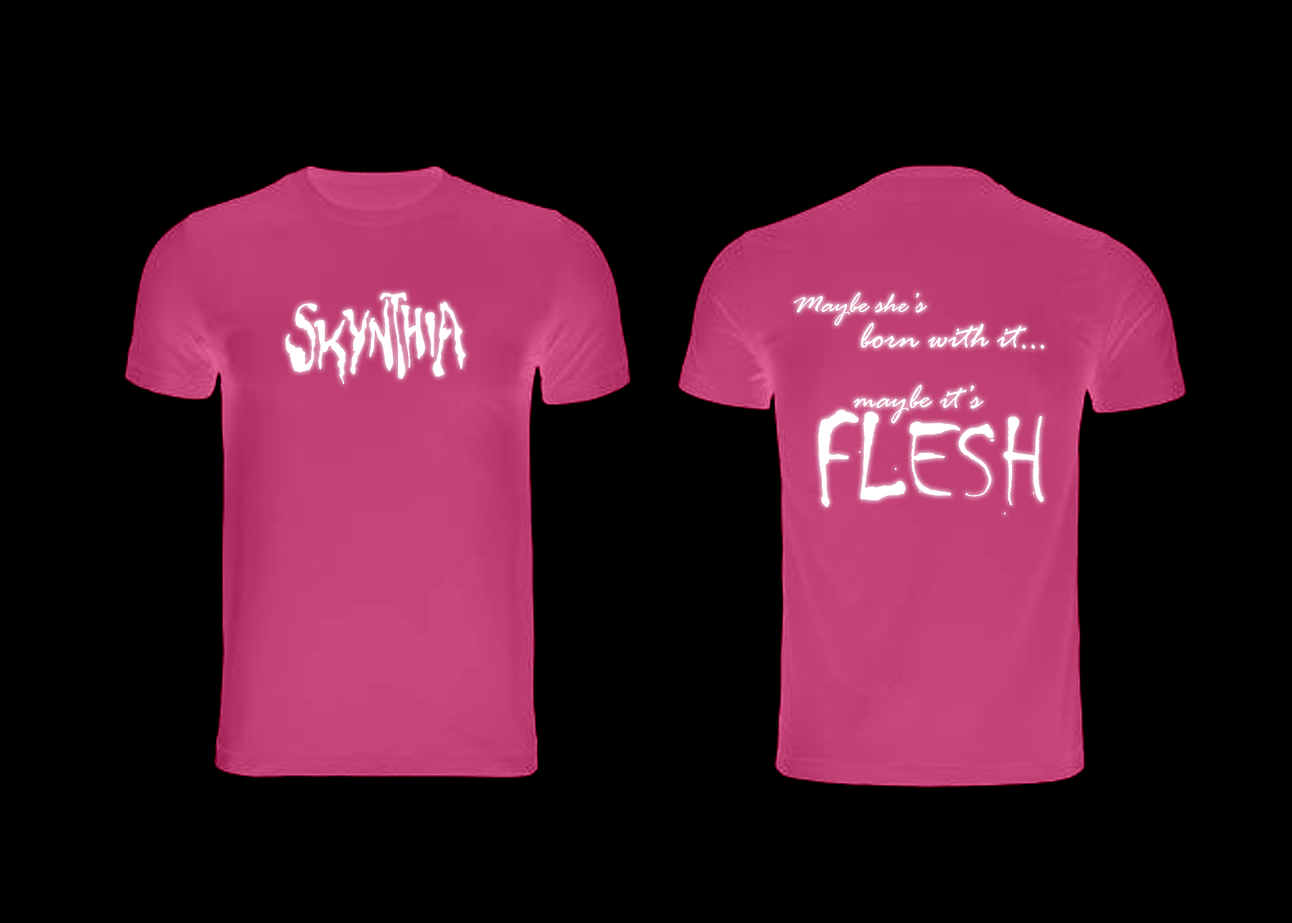
<style>
.page{position:relative;width:1292px;height:923px;background:#000000}
.page>*{position:absolute;margin:0}
.t1{font:38.5px/35.9px "RageItalic";color:#ffffff}
.t2{font:30.8px/41px "RageItalic";color:#ffffff}
.t3{font:35.9px "RageItalic";color:#ffffff}
.t4{font:123.1px "Chiller-Regular";color:#ffffff}
</style>
<div class="page">
<p class="t1" style="left:794px;top:292px;width:251px;height:57px;text-align:center"><span class="t2">Maybe she’s<br></span>born with it...</p>
<p class="t3" style="left:854px;top:385px;width:130px;height:38px">maybe it’s</p>
<p class="t4" style="left:818px;top:410px;width:225px;height:104px">FLESH</p>
</div>
